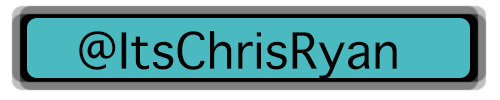
<style>
.page{position:relative;width:500px;height:100px;background:#4bb9c0}
.page>*{position:absolute;margin:0}
.t1{font:48px "Thonburi";color:#040404}
</style>
<div class="page">
<p class="t1" style="left:79px;top:31px;width:318px;height:48px">@ItsChrisRyan</p>
</div>
